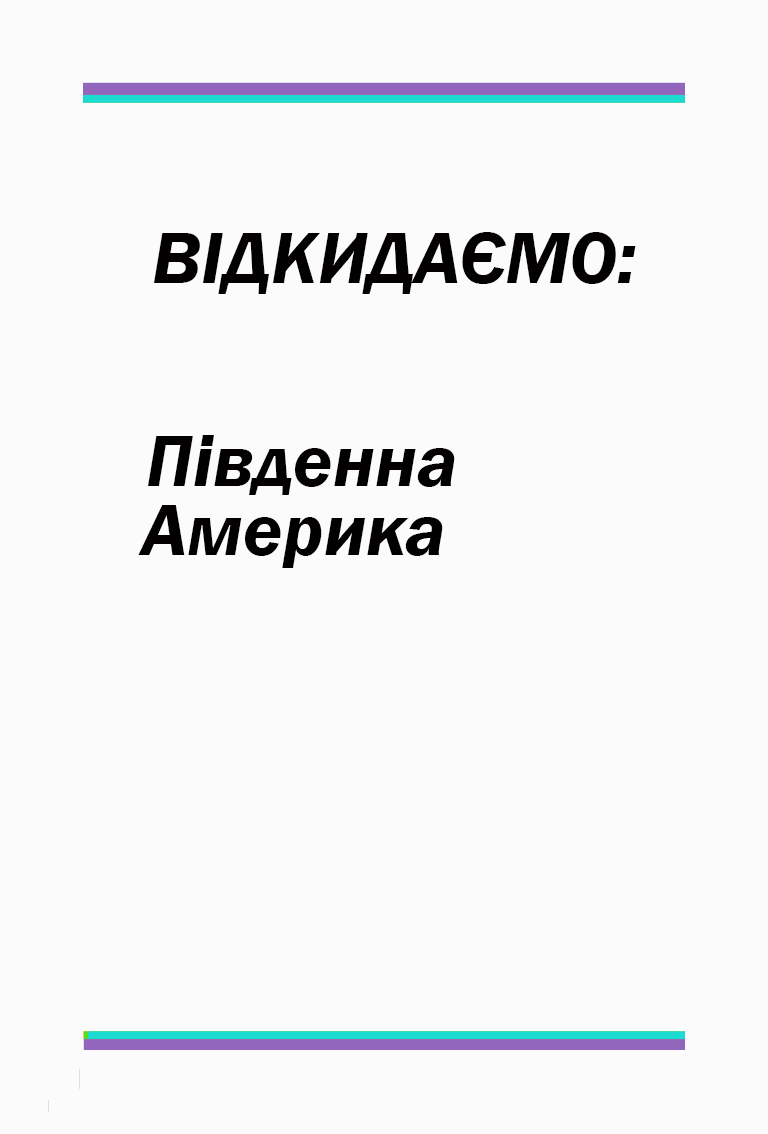
<style>
.page{position:relative;width:768px;height:1134px;background:#fbfbfb}
.page>*{position:absolute;margin:0}
.t1{font:75px "FranklinGothic-DemiItalic";color:#020000}
</style>
<div class="page">
<p class="t1" style="left:153px;top:232px;width:483px;height:62px">ВІДКИДАЄМО:</p>
<p class="t1" style="left:147px;top:435px;width:308px;height:60px">Південна</p>
<p class="t1" style="left:138px;top:505px;width:305px;height:63px">Америка</p>
</div>
